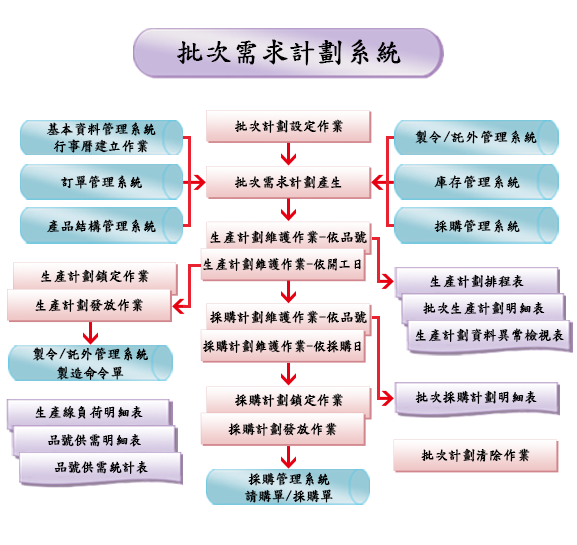
<style>
.page{position:relative;width:577px;height:545px;background:#ffffff}
.page>*{position:absolute;margin:0}
.t1{font:27.5px "DFKaiShu-SB-Estd-BF";color:#000000;font-weight:bold}
.t2{font:13.7px/16.5px "DFKaiShu-SB-Estd-BF";color:#000000;font-weight:bold}
.t3{font:13.7px "DFKaiShu-SB-Estd-BF";color:#000000;font-weight:bold}
.t4{font:13.7px "DFKaiShu-SB-Estd-BF";color:#000000;font-weight:bold;scale:0.92 1}
.t5{font:13.7px/19.2px "DFKaiShu-SB-Estd-BF";color:#000000;font-weight:bold}
</style>
<div class="page">
<p class="t1" style="left:177px;top:39px;width:224px;height:27px">批次需求計劃系統</p>
<p class="t2" style="left:46px;top:122px;width:110px;height:31px;text-align:center">基本資料管理系統<br>行事曆建立作業</p>
<p class="t3" style="left:235px;top:119px;width:108px;height:14px">批次計劃設定作業</p>
<p class="t3" style="left:415px;top:130px;width:122px;height:14px">製令/託外管理系統</p>
<p class="t3" style="left:60px;top:175px;width:82px;height:14px">訂單管理系統</p>
<p class="t3" style="left:235px;top:175px;width:107px;height:14px">批次需求計劃產生</p>
<p class="t3" style="left:434px;top:175px;width:86px;height:14px">庫存管理系統</p>
<p class="t3" style="left:47px;top:219px;width:109px;height:14px">產品結構管理系統</p>
<p class="t3" style="left:434px;top:219px;width:86px;height:14px">採購管理系統</p>
<p class="t3" style="left:210px;top:230px;width:157px;height:14px">生產計劃維護作業-依品號</p>
<p class="t4" style="left:203px;top:257px;width:158px;height:14px">生產計劃維護作業-依開工日</p>
<p class="t3" style="left:41px;top:269px;width:108px;height:14px">生產計劃鎖定作業</p>
<p class="t3" style="left:430px;top:274px;width:94px;height:14px">生產計劃排程表</p>
<p class="t3" style="left:35px;top:298px;width:108px;height:14px">生產計劃發放作業</p>
<p class="t3" style="left:423px;top:301px;width:122px;height:14px">批次生產計劃明細表</p>
<p class="t3" style="left:210px;top:310px;width:157px;height:14px">採購計劃維護作業-依品號</p>
<p class="t3" style="left:415px;top:328px;width:149px;height:14px">生產計劃資料異常檢視表</p>
<p class="t4" style="left:202px;top:339px;width:159px;height:14px">採購計劃維護作業-依採購日</p>
<p class="t5" style="left:33px;top:347px;width:115px;height:33px;text-align:center">製令/託外管理系統<br>製造命令單</p>
<p class="t3" style="left:415px;top:390px;width:122px;height:14px">批次採購計劃明細表</p>
<p class="t3" style="left:235px;top:393px;width:108px;height:14px">採購計劃鎖定作業</p>
<p class="t3" style="left:35px;top:405px;width:108px;height:14px">生產線負荷明細表</p>
<p class="t3" style="left:228px;top:422px;width:109px;height:14px">採購計劃發放作業</p>
<p class="t3" style="left:48px;top:434px;width:93px;height:13px">品號供需明細表</p>
<p class="t3" style="left:421px;top:448px;width:109px;height:14px">批次計劃清除作業</p>
<p class="t3" style="left:54px;top:461px;width:94px;height:13px">品號供需統計表</p>
<p class="t2" style="left:244px;top:472px;width:89px;height:31px;text-align:center">採購管理系統<br>請購單/採購單</p>
</div>
